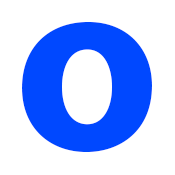
<style>
.page{position:relative;width:175px;height:175px;background:#ffffff}
.page>*{position:absolute;margin:0}
.t1{font:254.2px "MyriadPro-Bold";color:#0048ff}
</style>
<div class="page">
<p class="t1" style="left:22px;top:21px;width:130px;height:131px">o</p>
</div>
